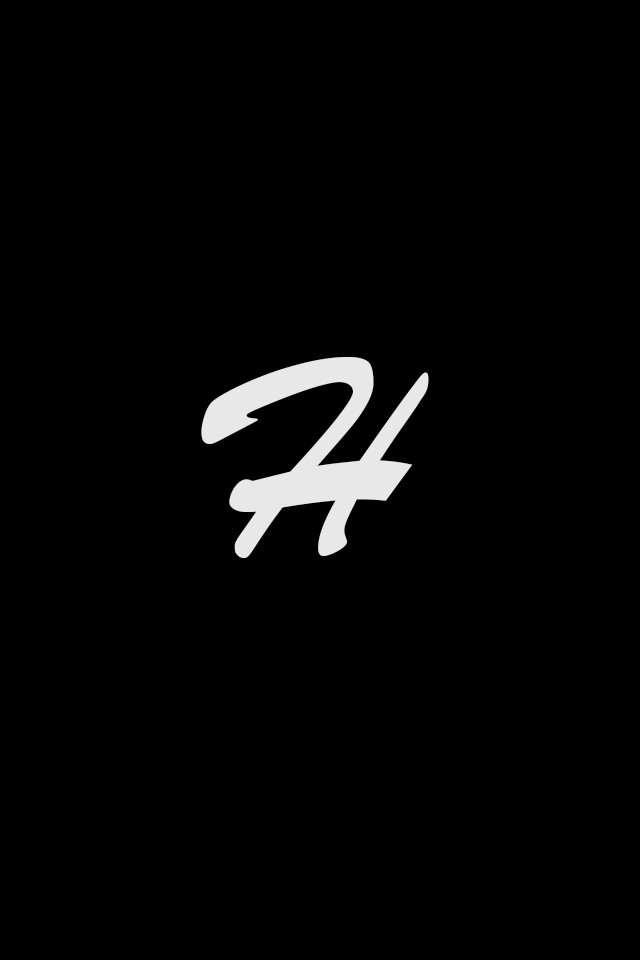
<style>
.page{position:relative;width:640px;height:960px;background:#000000}
.page>*{position:absolute;margin:0}
.t1{font:300px "BrushScriptMT";color:#e8e8e8}
</style>
<div class="page">
<p class="t1" style="left:201px;top:357px;width:228px;height:201px">H</p>
</div>
